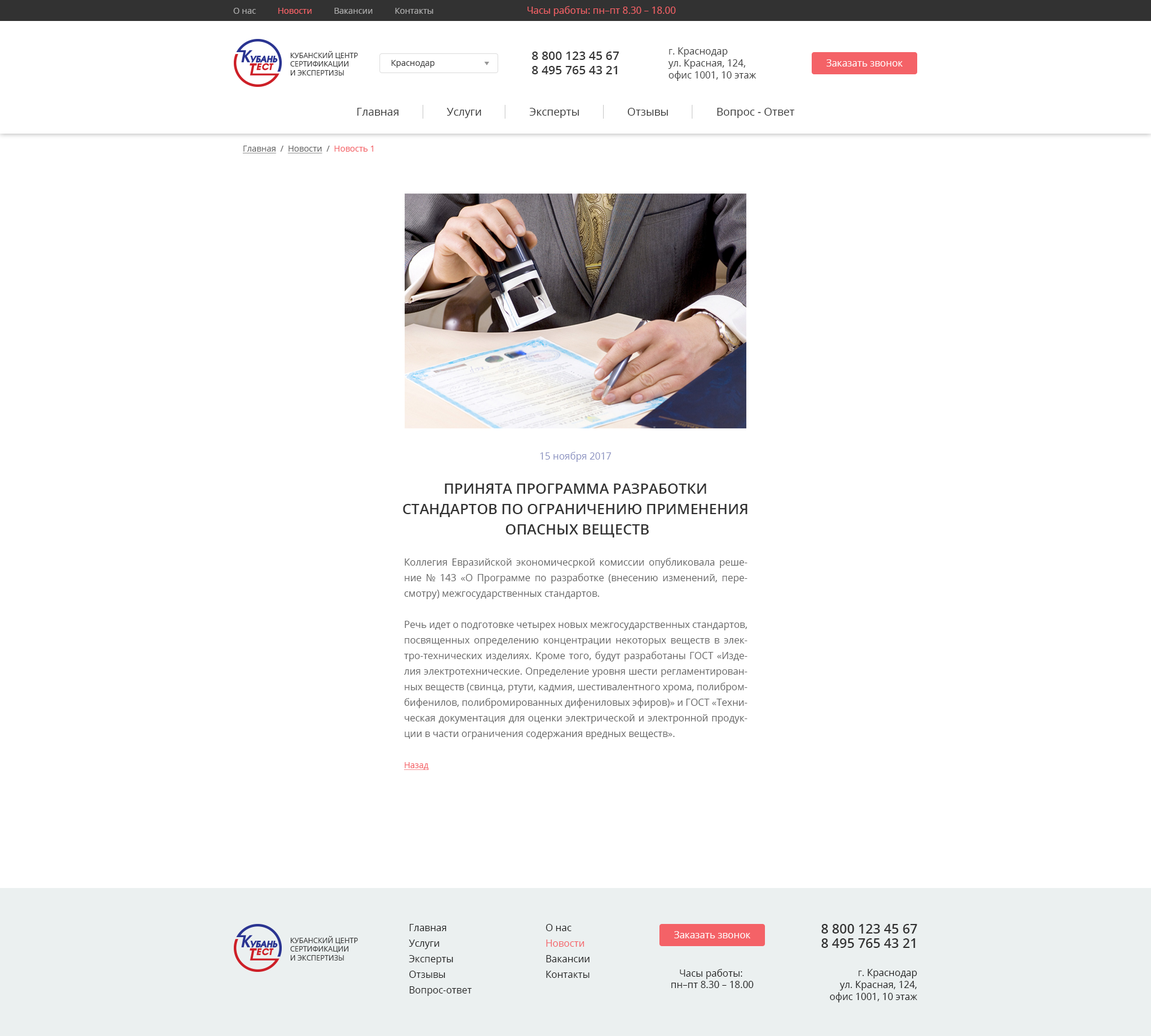
<style>
.page{position:relative;width:1151px;height:1036px;background:#ffffff}
.page>*{position:absolute;margin:0}
.t1{font:9.6px "OpenSans";color:#f46267}
.t2{font:8.4px "OpenSans";color:#aaaaaa}
.t3{font:8.4px "OpenSans";color:#f46267}
.t4{font:7.2px "OpenSans";color:#3c3c3c;text-transform:uppercase}
.t5{font:12px "OpenSans-Semibold";color:#323232}
.t6{font:9.6px/12px "OpenSans";color:#3c3c3c}
.t7{font:8.4px "OpenSans";color:#3c3c3c}
.t8{font:9.6px "OpenSans";color:#ffffff}
.t9{font:10.8px "OpenSans";color:#323232}
.t10{font:8.4px "OpenSans";color:#646464;text-decoration:underline}
.t11{font:8.4px "OpenSans";color:#646464}
.t12{font:9.6px "OpenSans";color:#8a91c1}
.t13{font:14.4px/20.4px "OpenSans-Semibold";color:#323232;text-transform:uppercase}
.t14{font:9.6px/15.6px "OpenSans";color:#646464}
.t15{font:8.4px/15.6px "OpenSans";color:#f46267;text-decoration:underline}
.t16{font:9.6px/15.6px "OpenSans";color:#1e1e1e}
.t17{font:9.6px/15.6px "OpenSans";color:#f46267}
.t18{font:13.2px "OpenSans-Semibold";color:#323232}
.t19{font:9.6px "OpenSans";color:#1e1e1e}
.t20{font:9.6px/12px "OpenSans";color:#1e1e1e}
</style>
<div class="page">
<p class="t1" style="left:527px;top:6px;width:148px;height:10px">Часы работы: пн–пт 8.30 – 18.00</p>
<p class="t2" style="left:233px;top:8px;width:200px;height:6px">О нас          <span class="t3">Новости</span>          Вакансии          Контакты</p>
<p class="t4" style="left:290px;top:51px;width:68px;height:25px">Кубанский центр<br>сертификации<br>и экспертизы</p>
<p class="t5" style="left:532px;top:52px;width:87px;height:8px">8 800 123 45 67</p>
<p class="t6" style="left:668px;top:47px;width:88px;height:34px">г. Краснодар<br>ул. Красная, 124, <br>офис 1001, 10 этаж</p>
<p class="t7" style="left:391px;top:60px;width:44px;height:8px">Краснодар</p>
<p class="t5" style="left:532px;top:66px;width:85px;height:8px">8 495 765 43 21</p>
<p class="t8" style="left:826px;top:59px;width:77px;height:8px">Заказать звонок</p>
<p class="t9" style="left:357px;top:108px;width:438px;height:10px">Главная                 Услуги                 Эксперты                 Отзывы                 Вопрос - Ответ</p>
<p class="t3" style="left:243px;top:146px;width:130px;height:7px"><span class="t10">Главная</span><span class="t11">  /  </span><span class="t10">Новости</span><span class="t11">  /  </span>Новость 1</p>
<p class="t12" style="left:540px;top:452px;width:71px;height:10px">15 ноября 2017</p>
<p class="t13" style="left:403px;top:484px;width:344px;height:54px;text-align:center">Принята Программа разработки <br>стандартов по ограничению применения <br>опасных веществ</p>
<p class="t14" style="left:404px;top:558px;width:343px;height:212px;text-align:justify">Коллегия Евразийской экономичесркой комиссии опубликовала решение № 143 «О Программе по разработке (внесению изменений, пересмотру) межгосударственных стандартов.<br><br>Речь идет о подготовке четырех новых межгосударственных стандартов, посвященных определению концентрации некоторых веществ в электро-технических изделиях. Кроме того, будут разработаны ГОСТ «Изделия электротехнические. Определение уровня шести регламентированных веществ (свинца, ртути, кадмия, шестивалентного хрома, полибромбифенилов, полибромированных дифениловых эфиров)» и ГОСТ «Техническая документация для оценки электрической и электронной продукции в части ограничения содержания вредных веществ».<br><span class="t15"><br>Назад</span></p>
<p class="t16" style="left:409px;top:924px;width:63px;height:72px">Главная<br>Услуги<br>Эксперты<br>Отзывы<br>Вопрос-ответ</p>
<p class="t16" style="left:545px;top:924px;width:45px;height:54px">О нас<br><span class="t17">Новости<br></span>Вакансии<br>Контакты</p>
<p class="t18" style="left:821px;top:924px;width:96px;height:10px">8 800 123 45 67</p>
<p class="t4" style="left:290px;top:936px;width:68px;height:25px">Кубанский центр<br>сертификации<br>и экспертизы</p>
<p class="t8" style="left:674px;top:931px;width:76px;height:8px">Заказать звонок</p>
<p class="t18" style="left:821px;top:939px;width:94px;height:9px">8 495 765 43 21</p>
<p class="t19" style="left:671px;top:969px;width:82px;height:19px;text-align:center">Часы работы: <br>пн–пт 8.30 – 18.00</p>
<p class="t20" style="left:829px;top:969px;width:88px;height:34px;text-align:right">г. Краснодар<br>ул. Красная, 124,<br>офис 1001, 10 этаж</p>
</div>
